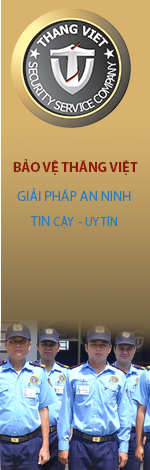
<style>
.page{position:relative;width:150px;height:470px}
.page>*{position:absolute;margin:0}
.t1{font:14px "MyriadPro-Bold";color:#8f180b}
.t2{font:14px "MyriadPro-Regular";color:#297cbc}
.t3{font:12px "MyriadPro-Regular";color:#297cbc}
</style>
<div class="page">
<p class="t1" style="left:13px;top:159px;width:125px;height:16px">BẢO VỆ THĂNG VIỆT</p>
<p class="t2" style="left:17px;top:188px;width:114px;height:13px">GIẢI PHÁP AN NINH</p>
<p class="t3" style="left:30px;top:216px;width:87px;height:13px"><span class="t2">TIN </span>CẬY  - UY TÍN</p>
</div>
